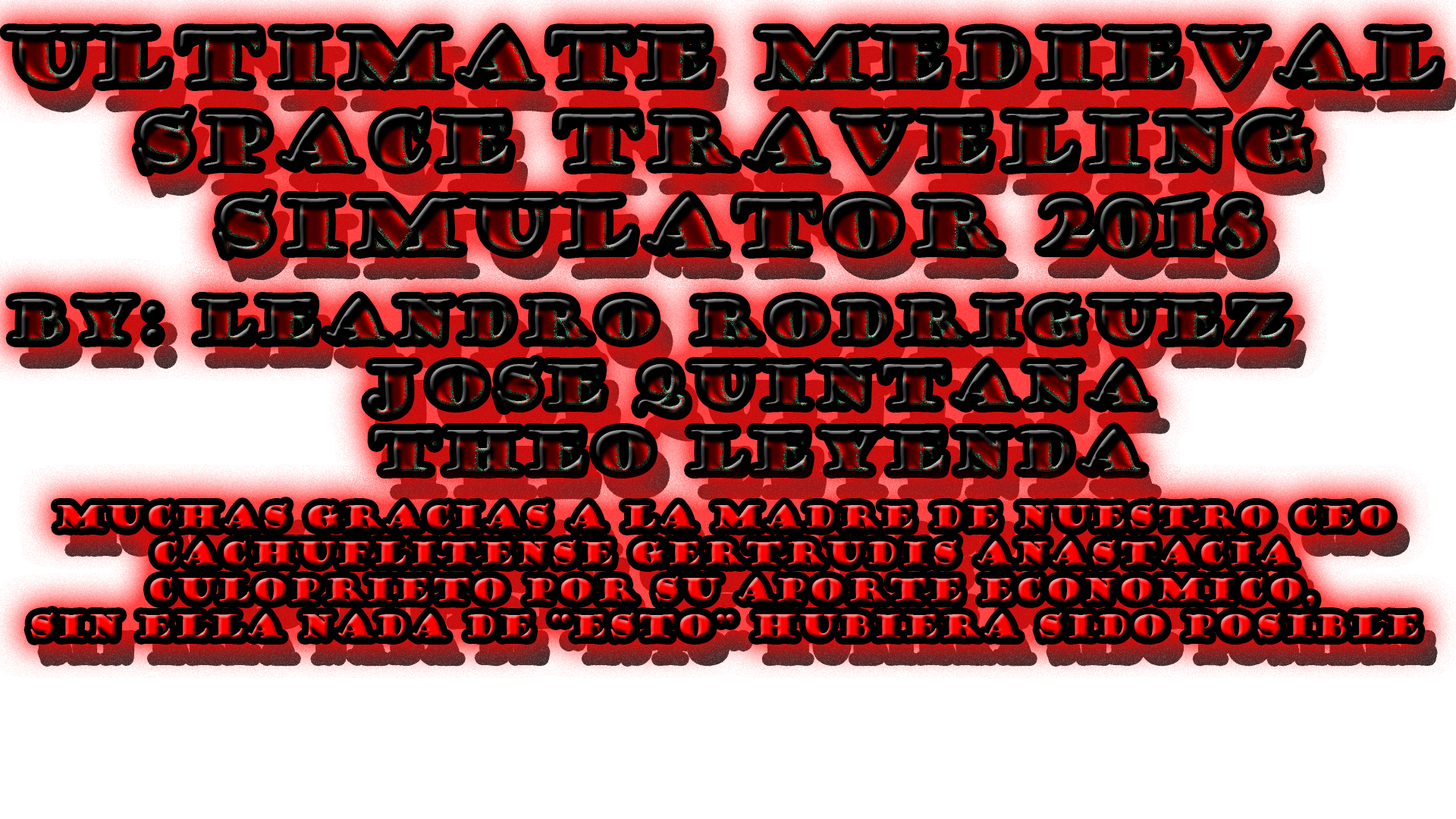
<style>
.page{position:relative;width:1456px;height:819px;background:#ffffff}
.page>*{position:absolute;margin:0}
.t1{font:30.3px "GoudyStout"}
</style>
<div class="page">
<p class="t1" style="left:30px;top:504px;width:1389px;height:135px;text-align:center">Muchas gracias a la madre de nuestro ceo <br>cachuflitense gertrudis anastacia <br>culoprieto por su aporte economico,<br>sin ella nada de “esto” hubiera sido posible</p>
</div>
